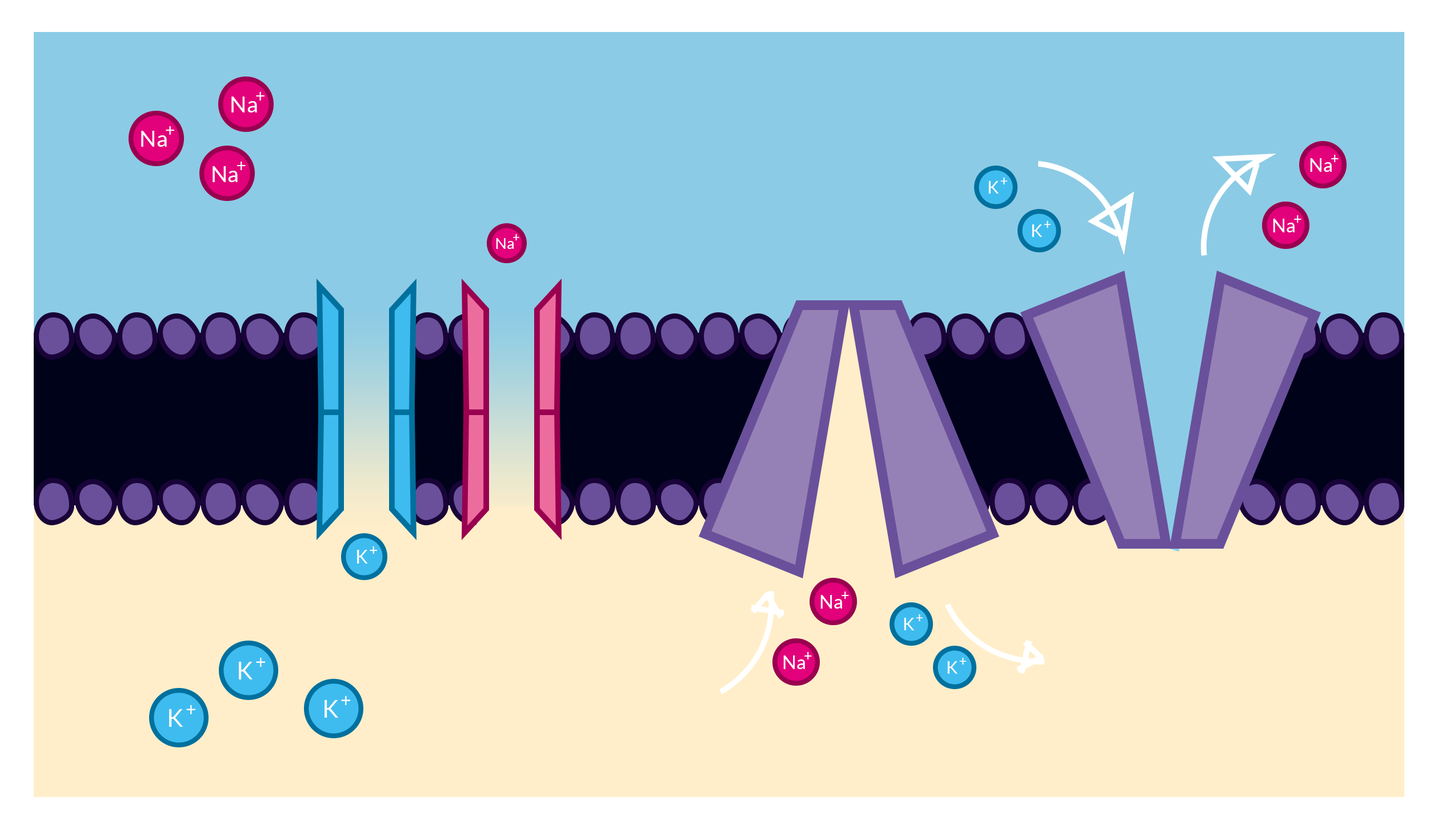
<style>
.page{position:relative;width:1438px;height:829px;background:#8ccbe5}
.page>*{position:absolute;margin:0}
.t1{font:22.3px "Lato-Regular";color:#ffffff}
.t2{font:17.1px "Lato-Regular";color:#ffffff}
.t3{font:18.7px "Lato-Regular";color:#ffffff}
.t4{font:14.4px "Lato-Regular";color:#ffffff}
.t5{font:17px "Lato-Regular";color:#ffffff}
.t6{font:13px "Lato-Regular";color:#ffffff}
.t7{font:15.4px "Lato-Regular";color:#ffffff}
.t8{font:11.8px "Lato-Regular";color:#ffffff}
.t9{font:18.5px "Lato-Regular";color:#ffffff}
.t10{font:14.2px "Lato-Regular";color:#ffffff}
.t11{font:24.2px "Lato-Regular";color:#ffffff}
</style>
<div class="page">
<p class="t1" style="left:231px;top:97px;width:26px;height:16px">Na</p>
<p class="t2" style="left:256px;top:92px;width:8px;height:9px">+</p>
<p class="t1" style="left:141px;top:131px;width:26px;height:16px">Na</p>
<p class="t2" style="left:166px;top:126px;width:8px;height:9px">+</p>
<p class="t2" style="left:237px;top:162px;width:9px;height:8px">+</p>
<p class="t3" style="left:1310px;top:158px;width:21px;height:14px">Na</p>
<p class="t4" style="left:1331px;top:155px;width:7px;height:7px">+</p>
<p class="t1" style="left:212px;top:166px;width:26px;height:16px">Na</p>
<p class="t5" style="left:988px;top:181px;width:10px;height:13px">K</p>
<p class="t6" style="left:1000px;top:178px;width:7px;height:6px">+</p>
<p class="t6" style="left:1044px;top:221px;width:6px;height:7px">+</p>
<p class="t3" style="left:1273px;top:219px;width:21px;height:13px">Na</p>
<p class="t4" style="left:1294px;top:215px;width:7px;height:8px">+</p>
<p class="t5" style="left:1032px;top:224px;width:10px;height:13px">K</p>
<p class="t7" style="left:496px;top:238px;width:18px;height:11px">Na</p>
<p class="t8" style="left:513px;top:234px;width:6px;height:6px">+</p>
<p class="t9" style="left:357px;top:550px;width:11px;height:14px">K</p>
<p class="t10" style="left:370px;top:547px;width:7px;height:7px">+</p>
<p class="t4" style="left:841px;top:592px;width:8px;height:7px">+</p>
<p class="t3" style="left:820px;top:595px;width:22px;height:14px">Na</p>
<p class="t6" style="left:916px;top:615px;width:6px;height:6px">+</p>
<p class="t5" style="left:904px;top:618px;width:10px;height:13px">K</p>
<p class="t4" style="left:804px;top:652px;width:8px;height:8px">+</p>
<p class="t11" style="left:239px;top:662px;width:13px;height:18px">K</p>
<p class="t9" style="left:256px;top:658px;width:9px;height:9px">+</p>
<p class="t3" style="left:783px;top:656px;width:22px;height:13px">Na</p>
<p class="t5" style="left:947px;top:661px;width:10px;height:13px">K</p>
<p class="t6" style="left:959px;top:658px;width:7px;height:7px">+</p>
<p class="t11" style="left:324px;top:700px;width:14px;height:18px">K</p>
<p class="t9" style="left:341px;top:696px;width:9px;height:9px">+</p>
<p class="t11" style="left:169px;top:709px;width:14px;height:18px">K</p>
<p class="t9" style="left:186px;top:705px;width:9px;height:10px">+</p>
</div>
